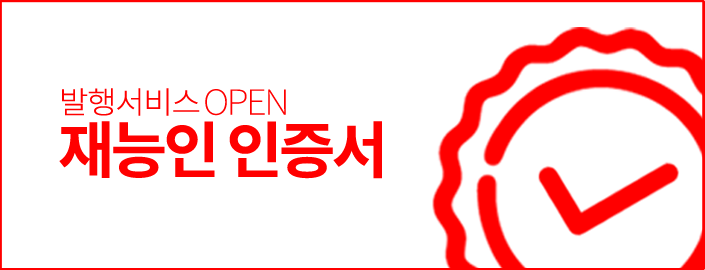
<style>
.page{position:relative;width:705px;height:270px;background:#ffffff}
.page>*{position:absolute;margin:0}
.t1{font:30.6px "NotoSansCJKkr-Light";letter-spacing:-0.04em;color:#ff0000;scale:1.05 1}
.t2{font:34.5px "NotoSansCJKkr-Thin";letter-spacing:-0.06em;color:#ff0000;scale:1.05 1}
.t3{font:61.3px "NotoSansCJKkr-Bold";letter-spacing:-0.06em;color:#ff0000}
</style>
<div class="page">
<p class="t1" style="left:62px;top:88px;width:138px;height:28px">발행서비스</p>
<p class="t2" style="left:205px;top:89px;width:81px;height:27px">OPEN</p>
<p class="t3" style="left:59px;top:121px;width:323px;height:58px">재능인 인증서</p>
</div>
